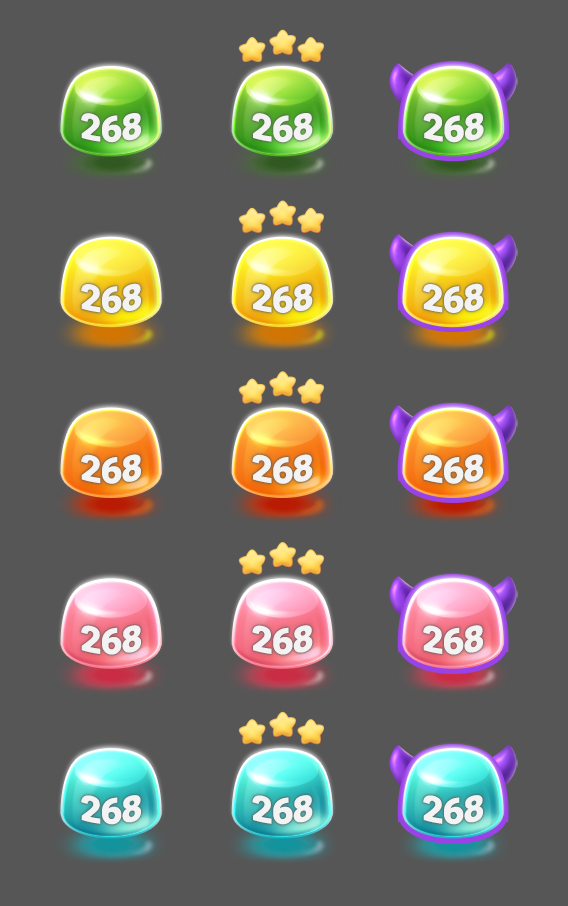
<style>
.page{position:relative;width:568px;height:906px;background:#565656}
.page>*{position:absolute;margin:0}
.t1{font:36.7px "Roboto-Black";letter-spacing:-0.025em;color:#f3f3f3}
</style>
<div class="page">
<p class="t1" style="left:81px;top:113px;width:60px;height:30px">268</p>
<p class="t1" style="left:252px;top:113px;width:61px;height:30px">268</p>
<p class="t1" style="left:423px;top:113px;width:61px;height:30px">268</p>
<p class="t1" style="left:81px;top:283px;width:60px;height:30px">268</p>
<p class="t1" style="left:252px;top:283px;width:61px;height:30px">268</p>
<p class="t1" style="left:423px;top:283px;width:60px;height:30px">268</p>
<p class="t1" style="left:81px;top:454px;width:60px;height:30px">268</p>
<p class="t1" style="left:252px;top:454px;width:61px;height:30px">268</p>
<p class="t1" style="left:423px;top:454px;width:60px;height:30px">268</p>
<p class="t1" style="left:81px;top:625px;width:60px;height:30px">268</p>
<p class="t1" style="left:252px;top:625px;width:61px;height:30px">268</p>
<p class="t1" style="left:423px;top:625px;width:60px;height:30px">268</p>
<p class="t1" style="left:81px;top:795px;width:60px;height:30px">268</p>
<p class="t1" style="left:252px;top:795px;width:61px;height:30px">268</p>
<p class="t1" style="left:423px;top:795px;width:60px;height:30px">268</p>
</div>
